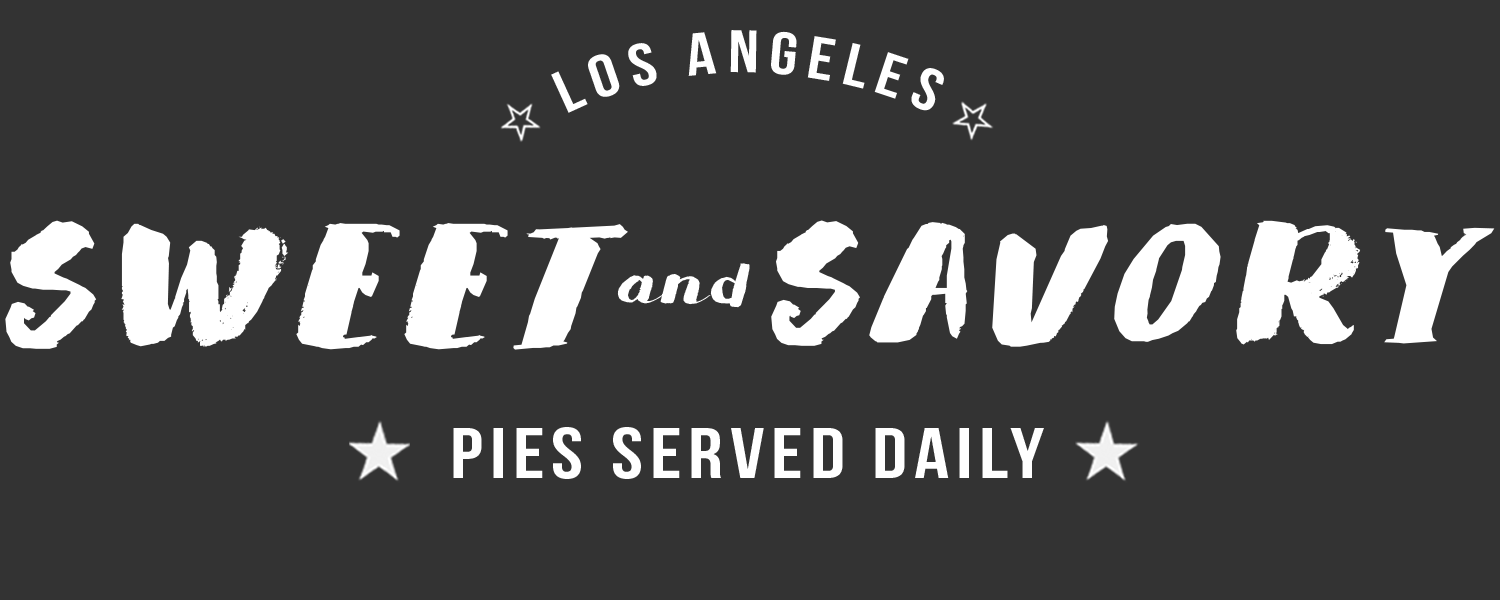
<style>
.page{position:relative;width:1500px;height:600px;background:#333333}
.page>*{position:absolute;margin:0}
.t1{font:59.9px "BebasNeue";letter-spacing:0.08em;color:#ffffff;scale:1.2 1}
.t2{font:150.4px "DKSaffronWalden";letter-spacing:0.08em;color:#ffffff;scale:1.2 1}
.t3{font:147px "DKSaffronWalden";letter-spacing:0.08em;color:#ffffff;scale:1.2 1}
.t4{font:52px "DKSaffronWalden";letter-spacing:0.08em;color:#ffffff;scale:1.2 1}
.t5{font:71.9px "BebasNeue";letter-spacing:0.08em;color:#ffffff;scale:1.2 1}
</style>
<div class="page">
<p class="t1" style="left:551px;top:30px;width:393px;height:83px">LOS ANGELES</p>
<p class="t2" style="left:5px;top:220px;width:623px;height:130px">SWEET</p>
<p class="t3" style="left:771px;top:220px;width:724px;height:127px">SAVORY</p>
<p class="t4" style="left:617px;top:263px;width:133px;height:45px">and</p>
<p class="t5" style="left:453px;top:427px;width:591px;height:52px">pies served daily</p>
</div>
